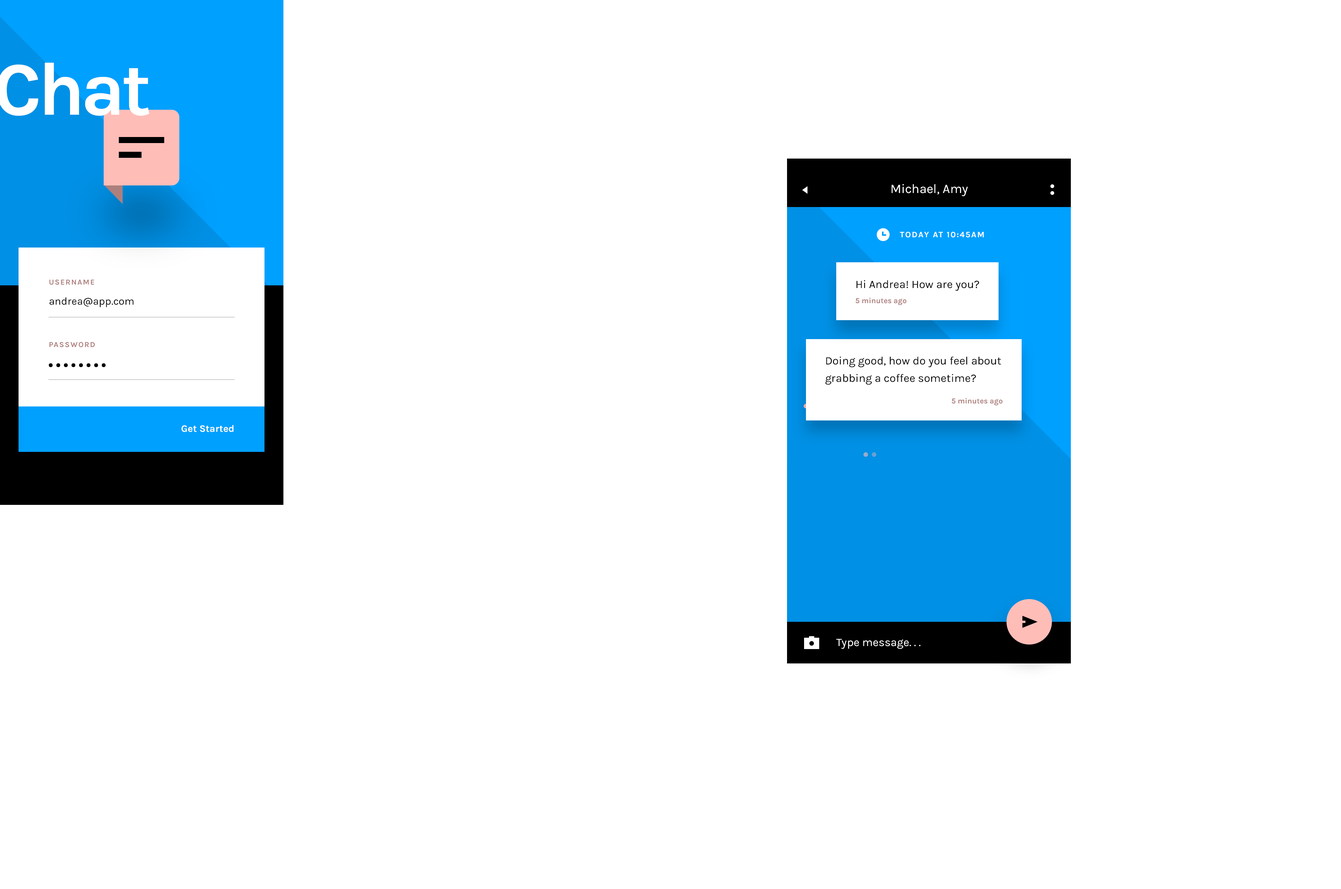
<style>
.page{position:relative;width:1341px;height:889px;background:#ffffff}
.page>*{position:absolute;margin:0}
.t1{font:12.9px "Karla-Regular";color:#ffffff}
.t2{font:8.3px "Karla-Bold";letter-spacing:0.1em;color:#ffffff}
.t3{font:7.6px "Karla-Bold";letter-spacing:0.1em;color:#ad807d}
.t4{font:11.4px "Karla-Regular";color:#000000}
.t5{font:10.6px "Karla-Regular";color:#000000}
.t6{font:7.6px "Karla-Bold";color:#ad807d}
.t7{font:11.4px/17.4px "Karla-Regular";color:#000000}
.t8{font:9.8px "Karla-Bold";color:#ffffff}
.t9{font:11.4px "Karla-Regular";color:#ffffff}
</style>
<div class="page">
<p class="t1" style="left:892px;top:184px;width:76px;height:12px">Michael, Amy</p>
<p class="t2" style="left:900px;top:232px;width:84px;height:6px">TODAY AT 10:45AM</p>
<p class="t3" style="left:49px;top:279px;width:45px;height:6px">USERNAME</p>
<p class="t4" style="left:856px;top:280px;width:123px;height:11px">Hi Andrea! How are you?</p>
<p class="t5" style="left:50px;top:297px;width:84px;height:10px">andrea@app.com</p>
<p class="t6" style="left:856px;top:297px;width:51px;height:8px">5 minutes ago</p>
<p class="t3" style="left:49px;top:342px;width:46px;height:5px">PASSWORD</p>
<p class="t7" style="left:825px;top:357px;width:176px;height:28px">Doing good, how do you feel about<br>grabbing a coffee sometime?</p>
<p class="t6" style="left:952px;top:398px;width:51px;height:7px">5 minutes ago</p>
<p class="t8" style="left:181px;top:425px;width:53px;height:7px">Get Started</p>
<p class="t9" style="left:836px;top:639px;width:85px;height:10px">Type message. . .</p>
</div>
